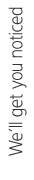
<style>
.page{position:relative;width:34px;height:180px;background:#ffffff}
.page>*{position:absolute;margin:0}
.t1{font:20px "IntervalSansPro-LightCond";color:#393535}
</style>
<div class="page">
<p class="t1" style="left:8px;top:7px;width:19px;height:149px;rotate:-90deg">We’ll get you noticed</p>
</div>
